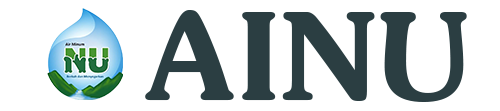
<style>
.page{position:relative;width:500px;height:111px;background:#ffffff}
.page>*{position:absolute;margin:0}
.t1{font:121.3px "SouvenirITCbyBT-Demi";color:#2b3e42}
</style>
<div class="page">
<p class="t1" style="left:145px;top:10px;width:322px;height:92px">AINU</p>
</div>
